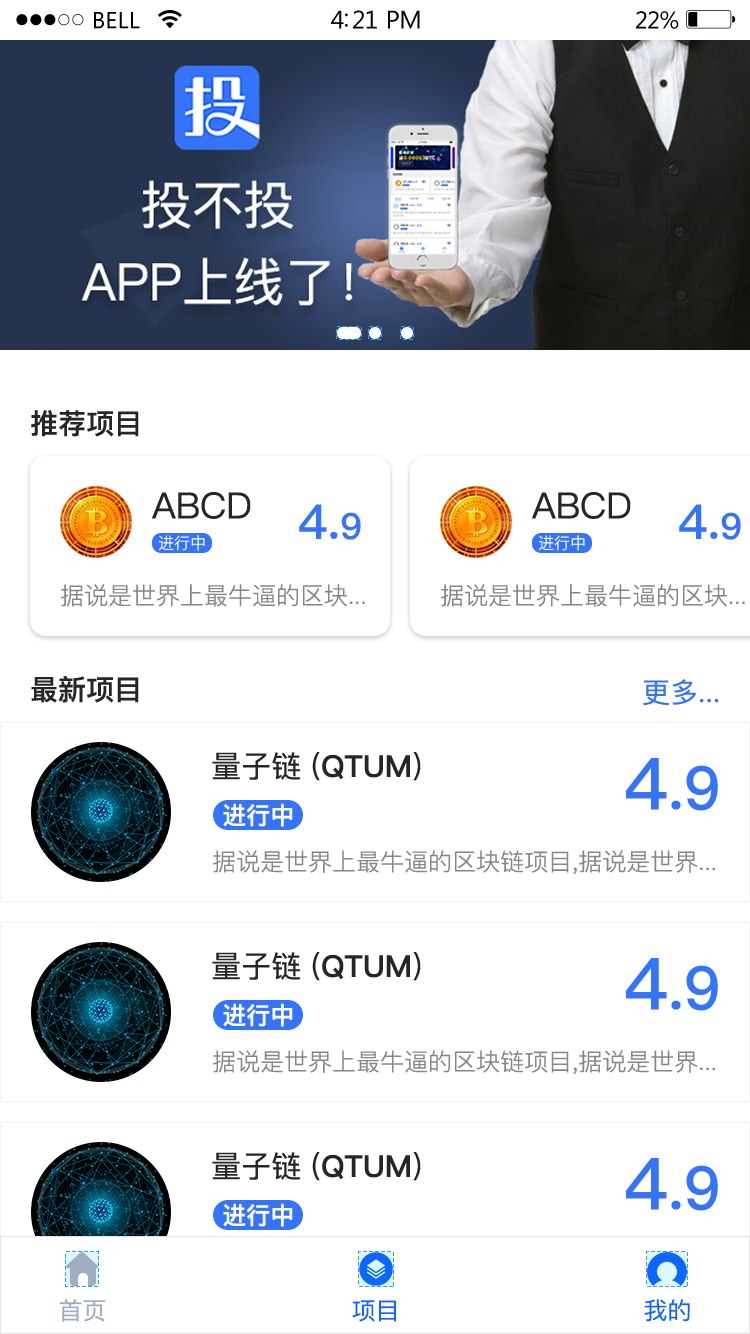
<style>
.page{position:relative;width:750px;height:1334px;background:#ffffff}
.page>*{position:absolute;margin:0}
.t1{font:28px "PingFang-SC-Bold";color:#262626}
.t2{font:36px "PingFang-SC-Medium";color:#262626}
.t3{font:48px "PingFang-SC-Bold";color:#3574fa}
.t4{font:36px "PingFang-SC-Bold";color:#3574fa}
.t5{font:16px "PingFang-SC-Regular";color:#ffffff}
.t6{font:24px "PingFang-SC-Regular";color:#868686}
.t7{font:28px "PingFang-SC-Medium";color:#3574fa}
.t8{font:30px "PingFang-SC-Medium";color:#262626}
.t9{font:30px "PingFang-SC-Heavy";color:#262626}
.t10{font:60px "PingFang-SC-Bold";color:#3574fa}
.t11{font:72px "PingFang-SC-Bold";color:#3574fa}
.t12{font:24px "PingFang-SC-Heavy";color:#ffffff}
.t13{font:24px "PingFangSC-Regular";color:#a0acc0}
.t14{font:24px "PingFangSC-Regular";color:#0d67ff}
</style>
<div class="page">
<p class="t1" style="left:31px;top:410px;width:108px;height:27px">推荐项目</p>
<p class="t2" style="left:152px;top:492px;width:99px;height:27px">ABCD</p>
<p class="t2" style="left:532px;top:492px;width:99px;height:27px">ABCD</p>
<p class="t3" style="left:299px;top:504px;width:62px;height:36px">4.<span class="t4">9</span></p>
<p class="t3" style="left:679px;top:504px;width:62px;height:36px">4.<span class="t4">9</span></p>
<p class="t5" style="left:159px;top:535px;width:46px;height:16px">进行中</p>
<p class="t5" style="left:539px;top:535px;width:46px;height:16px">进行中</p>
<p class="t6" style="left:61px;top:584px;width:304px;height:23px">据说是世界上最牛逼的区块...</p>
<p class="t6" style="left:441px;top:584px;width:304px;height:23px">据说是世界上最牛逼的区块...</p>
<p class="t1" style="left:31px;top:676px;width:108px;height:27px">最新项目</p>
<p class="t7" style="left:643px;top:679px;width:76px;height:27px">更多...</p>
<p class="t8" style="left:212px;top:752px;width:209px;height:29px">量子链 (<span class="t9">QTUM</span>)</p>
<p class="t10" style="left:626px;top:758px;width:92px;height:53px"><span class="t11">4</span>.9</p>
<p class="t12" style="left:223px;top:803px;width:70px;height:24px">进行中</p>
<p class="t6" style="left:213px;top:850px;width:502px;height:24px">据说是世界上最牛逼的区块链项目,据说是世界...</p>
<p class="t8" style="left:212px;top:952px;width:209px;height:29px">量子链 (<span class="t9">QTUM</span>)</p>
<p class="t10" style="left:626px;top:958px;width:92px;height:53px"><span class="t11">4</span>.9</p>
<p class="t12" style="left:223px;top:1003px;width:70px;height:24px">进行中</p>
<p class="t6" style="left:213px;top:1050px;width:502px;height:24px">据说是世界上最牛逼的区块链项目,据说是世界...</p>
<p class="t8" style="left:212px;top:1152px;width:209px;height:29px">量子链 (<span class="t9">QTUM</span>)</p>
<p class="t10" style="left:626px;top:1158px;width:92px;height:53px"><span class="t11">4</span>.9</p>
<p class="t12" style="left:223px;top:1203px;width:70px;height:24px">进行中</p>
<p class="t13" style="left:59px;top:1299px;width:47px;height:23px">首页</p>
<p class="t14" style="left:352px;top:1300px;width:44px;height:22px">项目</p>
<p class="t14" style="left:644px;top:1299px;width:46px;height:23px">我的</p>
</div>
